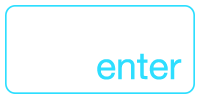
<style>
.page{position:relative;width:200px;height:100px;background:#ffffff}
.page>*{position:absolute;margin:0}
.t1{font:37.4px "HelveticaNeue";color:#2ddeff}
</style>
<div class="page">
<p class="t1" style="left:97px;top:53px;width:85px;height:27px">enter</p>
</div>
